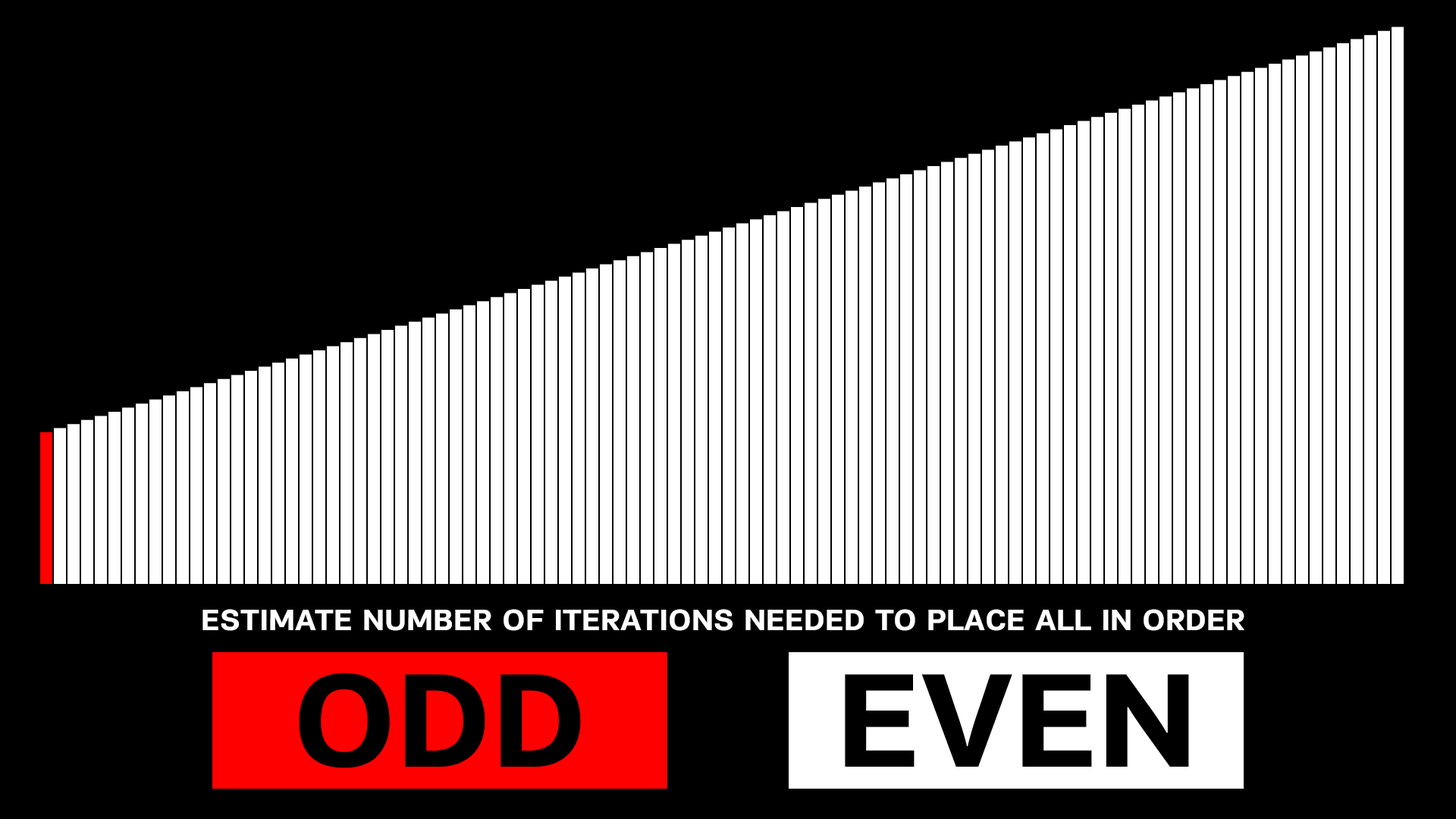
<style>
.page{position:relative;width:1456px;height:819px;background:#000000}
.page>*{position:absolute;margin:0}
.t1{font:30.3px "PFEncoreSansPro-Bold";color:#ffffff;text-transform:uppercase}
.t2{font:136.5px "PFEncoreSansPro-Bold";color:#000000}
</style>
<div class="page">
<p class="t1" style="left:202px;top:609px;width:1042px;height:22px">Estimate number of iterations needed to PLACE ALL in ORDER</p>
<p class="t2" style="left:299px;top:673px;width:282px;height:95px">ODD</p>
<p class="t2" style="left:845px;top:674px;width:344px;height:93px">EVEN</p>
</div>
